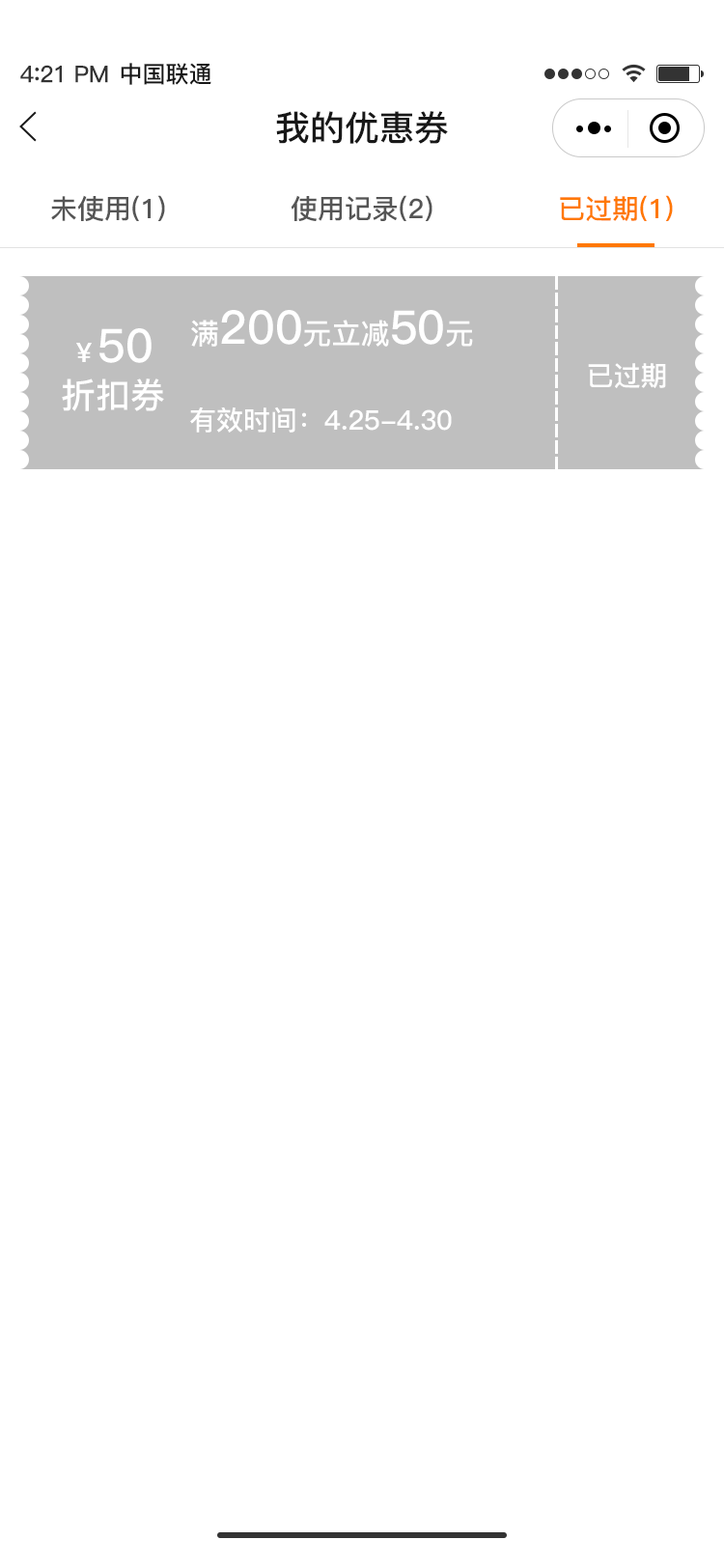
<style>
.page{position:relative;width:724px;height:1568px;background:#ffffff}
.page>*{position:absolute;margin:0}
.t1{font:23.2px "PingFang-SC-Bold";letter-spacing:-0.02em;color:#333333}
.t2{font:25.1px "PingFang-SC-Bold";letter-spacing:-0.02em;color:#333333}
.t3{font:23.2px "PingFang-SC-Bold";color:#181818}
.t4{font:34.8px "PingFang-SC-Bold";color:#181818}
.t5{font:27px "PingFang-SC-Bold";color:#555555}
.t6{font:27px "PingFang-SC-Bold";color:#ff7800}
.t7{font:46.3px "PingFang-SC-Bold";color:#ffffff}
.t8{font:29px "PingFang-SC-Bold";color:#ffffff}
.t9{font:27px "PingFang-SC-Bold";color:#ffffff}
.t10{font:34.8px "PingFang-SC-Bold";color:#ffffff}
</style>
<div class="page">
<p class="t1" style="left:20px;top:65px;width:88px;height:18px">4<span class="t2">:</span>21 PM</p>
<p class="t3" style="left:121px;top:63px;width:90px;height:22px">中国联通</p>
<p class="t4" style="left:276px;top:111px;width:172px;height:33px">我的优惠券</p>
<p class="t5" style="left:51px;top:195px;width:114px;height:26px">未使用(1)</p>
<p class="t5" style="left:291px;top:195px;width:142px;height:26px">使用记录(2)</p>
<p class="t6" style="left:560px;top:195px;width:113px;height:26px">已过期(1)</p>
<p class="t7" style="left:191px;top:310px;width:282px;height:37px"><span class="t8">满</span>200<span class="t8">元立减</span>50<span class="t8">元</span></p>
<p class="t7" style="left:76px;top:328px;width:76px;height:35px"><span class="t9">￥</span>50</p>
<p class="t9" style="left:588px;top:363px;width:78px;height:25px">已过期</p>
<p class="t10" style="left:62px;top:378px;width:102px;height:33px">折扣券</p>
<p class="t9" style="left:190px;top:406px;width:262px;height:27px">有效时间：4.25-4.30</p>
</div>
